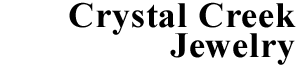
<style>
.page{position:relative;width:300px;height:65px;background:#ffffff}
.page>*{position:absolute;margin:0}
.t1{font:36px/30px "TimesNewRomanPS-BoldMT";letter-spacing:0.025em;color:#000000}
</style>
<div class="page">
<p class="t1" style="left:69px;top:2px;width:227px;height:63px;text-align:right">Crystal Creek<br>Jewelry</p>
</div>
